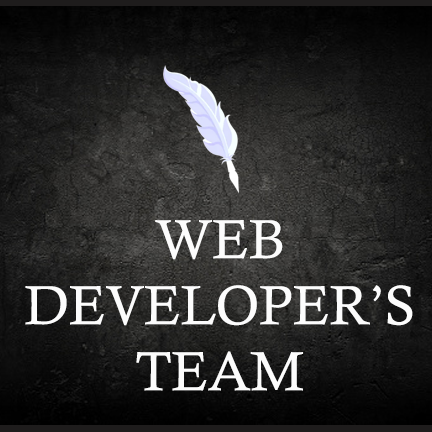
<style>
.page{position:relative;width:432px;height:432px}
.page>*{position:absolute;margin:0}
.t1{font:55px "CalistoMT";color:#fcfcfc}
</style>
<div class="page">
<p class="t1" style="left:25px;top:220px;width:388px;height:171px;text-align:center">WEB<br>DEVELOPER’S<br>TEAM</p>
</div>
